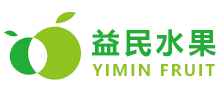
<style>
.page{position:relative;width:219px;height:96px;background:#ffffff}
.page>*{position:absolute;margin:0}
.t1{font:28.6px "MicrosoftYaHei-Bold";letter-spacing:0.133em;color:#22ad38}
.t2{font:15.8px "MicrosoftYaHei-Bold";letter-spacing:0.133em;color:#8fc320;text-transform:uppercase}
</style>
<div class="page">
<p class="t1" style="left:92px;top:29px;width:124px;height:28px">益民水果</p>
<p class="t2" style="left:92px;top:64px;width:123px;height:13px">Yimin fruit</p>
</div>
